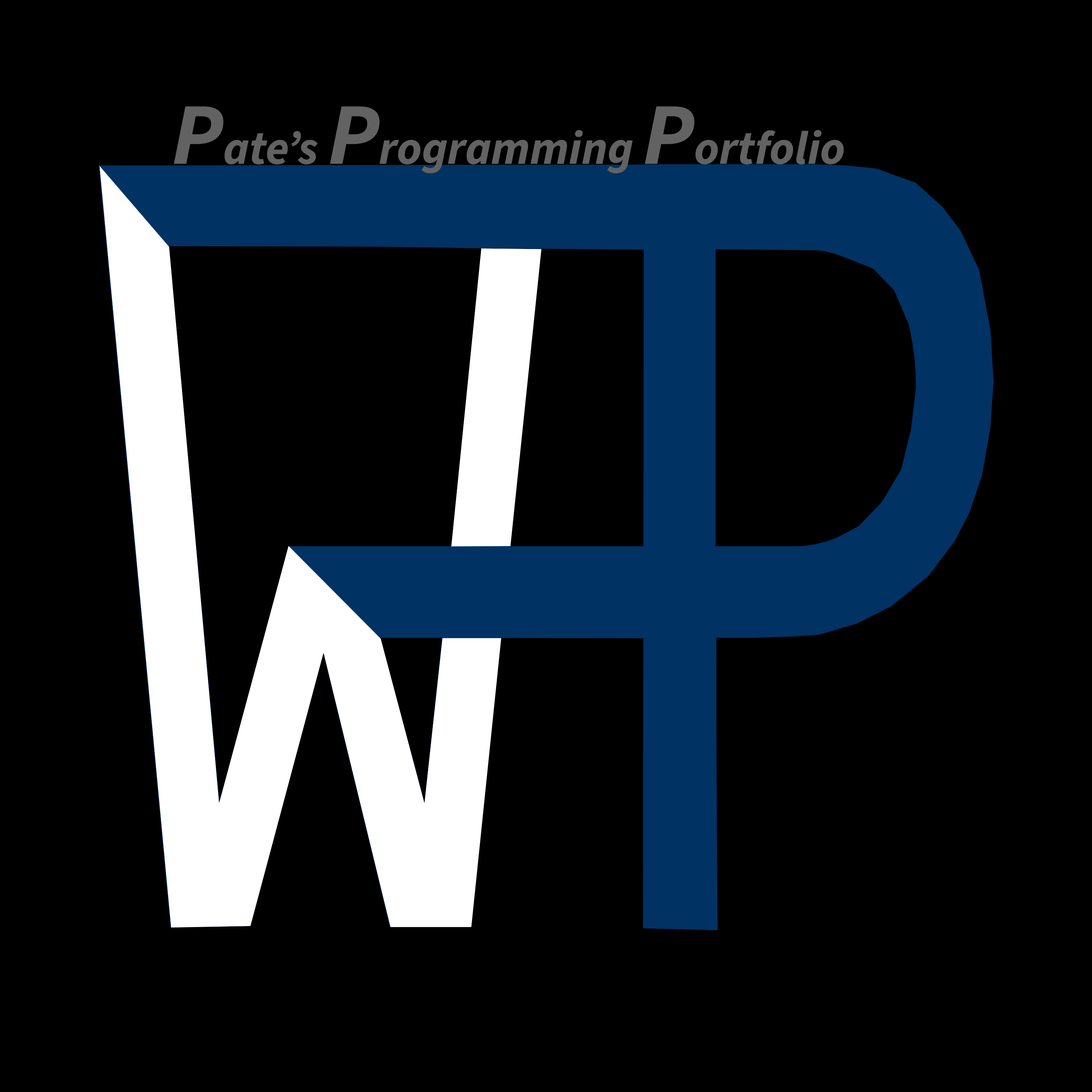
<style>
.page{position:relative;width:1092px;height:1092px;background:#000000}
.page>*{position:absolute;margin:0}
.t1{font:47px "SourceSansItalic_725.000wght";color:#626262}
.t2{font:88px "SourceSansItalic_725.000wght";color:#626262}
</style>
<div class="page">
<p class="t1" style="left:174px;top:106px;width:670px;height:68px"><span class="t2">P</span>ate’s <span class="t2">P</span>rogramming <span class="t2">P</span>ortfolio</p>
</div>
